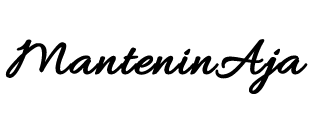
<style>
.page{position:relative;width:312px;height:120px;background:#ffffff}
.page>*{position:absolute;margin:0}
.t1{font:54.9px "Allura-Regular";color:#000000;font-weight:bold}
</style>
<div class="page">
<p class="t1" style="left:5px;top:39px;width:303px;height:55px">ManteninAja</p>
</div>
